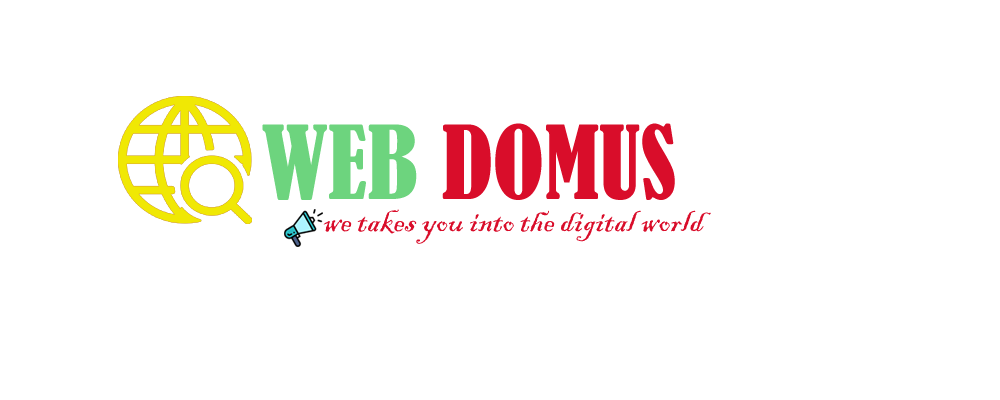
<style>
.page{position:relative;width:1000px;height:400px;background:#ffffff}
.page>*{position:absolute;margin:0}
.t1{font:94.5px "BernardMT-Condensed";color:#d90d2a}
.t2{font:94.5px "BernardMT-Condensed";color:#6dd47e}
.t3{font:35.4px "BlackadderITC-Regular";color:#d90d2a}
</style>
<div class="page">
<p class="t1" style="left:262px;top:123px;width:413px;height:77px"><span class="t2">WEB </span>DOMUS</p>
<p class="t3" style="left:323px;top:209px;width:388px;height:35px">we takes you into the digital world</p>
</div>
